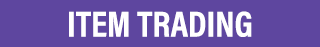
<style>
.page{position:relative;width:320px;height:47px;background:#5e469f}
.page>*{position:absolute;margin:0}
.t1{font:36.3px "AcuminProCond-Bold";color:#ffffff;text-transform:uppercase}
</style>
<div class="page">
<p class="t1" style="left:69px;top:11px;width:183px;height:26px">Item Trading</p>
</div>
